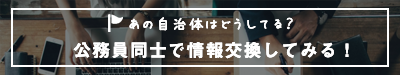
<style>
.page{position:relative;width:400px;height:75px}
.page>*{position:absolute;margin:0}
.t1{font:16px "APJapanesefont";letter-spacing:0.05em;color:#ffffff}
.t2{font:18px "MidashiGoPr6N-MB31";letter-spacing:0.05em;color:#ffffff}
</style>
<div class="page">
<p class="t1" style="left:129px;top:17px;width:164px;height:14px">あの自治体はどうしてる？</p>
<p class="t2" style="left:73px;top:42px;width:276px;height:17px">公務員同士で情報交換してみる！</p>
</div>
